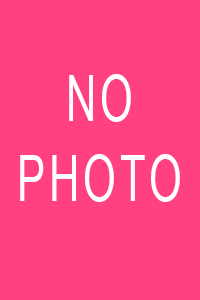
<style>
.page{position:relative;width:200px;height:300px;background:#ff4081}
.page>*{position:absolute;margin:0}
.t1{font:64px "ArialMT";letter-spacing:0.1em;color:#ffffff;scale:0.65 1}
</style>
<div class="page">
<p class="t1" style="left:69px;top:74px;width:62px;height:48px">NO</p>
<p class="t1" style="left:20px;top:154px;width:160px;height:48px">PHOTO</p>
</div>
